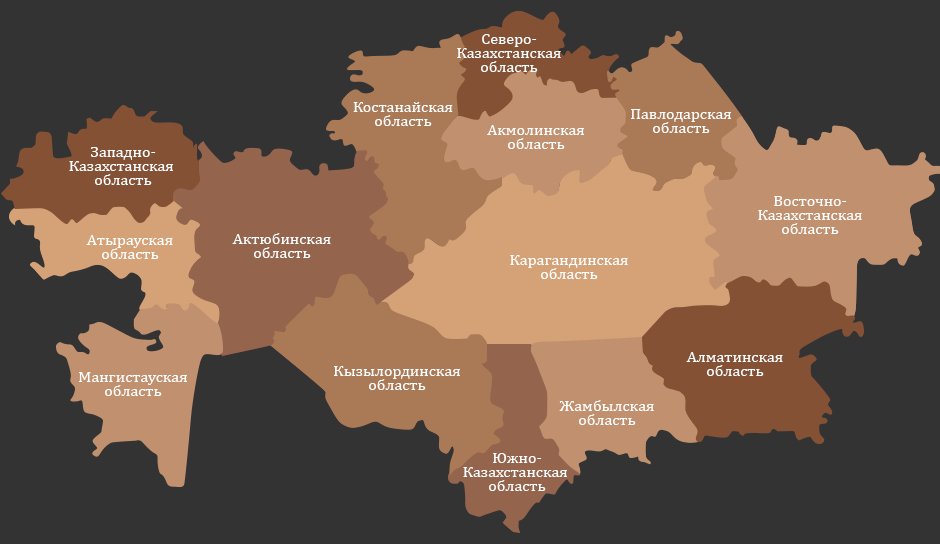
<style>
.page{position:relative;width:940px;height:544px;background:#333333}
.page>*{position:absolute;margin:0}
.t1{font:16px/14px "Cambria";color:#ffffff}
</style>
<div class="page">
<p class="t1" style="left:457px;top:34px;width:104px;height:38px;text-align:center">Северо-<br>Казахстанская<br>область</p>
<p class="t1" style="left:353px;top:102px;width:100px;height:24px;text-align:center">Костанайская<br>область</p>
<p class="t1" style="left:631px;top:109px;width:100px;height:24px;text-align:center">Павлодарская<br>область</p>
<p class="t1" style="left:487px;top:125px;width:97px;height:24px;text-align:center">Акмолинская<br>область</p>
<p class="t1" style="left:69px;top:147px;width:104px;height:38px;text-align:center">Западно-<br>Казахстанская <br>область</p>
<p class="t1" style="left:758px;top:196px;width:104px;height:38px;text-align:center">Восточно-<br>Казахстанская<br>область</p>
<p class="t1" style="left:232px;top:233px;width:99px;height:25px;text-align:center">Актюбинская<br>область</p>
<p class="t1" style="left:86px;top:235px;width:87px;height:24px;text-align:center">Атырауская<br>область</p>
<p class="t1" style="left:510px;top:255px;width:118px;height:24px;text-align:center">Карагандинская<br>область</p>
<p class="t1" style="left:686px;top:352px;width:97px;height:24px;text-align:center">Алматинская<br>область</p>
<p class="t1" style="left:334px;top:366px;width:126px;height:24px;text-align:center">Кызылординская<br>область</p>
<p class="t1" style="left:79px;top:372px;width:108px;height:24px;text-align:center">Мангистауская<br>область</p>
<p class="t1" style="left:559px;top:400px;width:95px;height:25px;text-align:center">Жамбылская<br>область</p>
<p class="t1" style="left:463px;top:453px;width:104px;height:38px;text-align:center">Южно-<br>Казахстанская <br>область</p>
</div>
